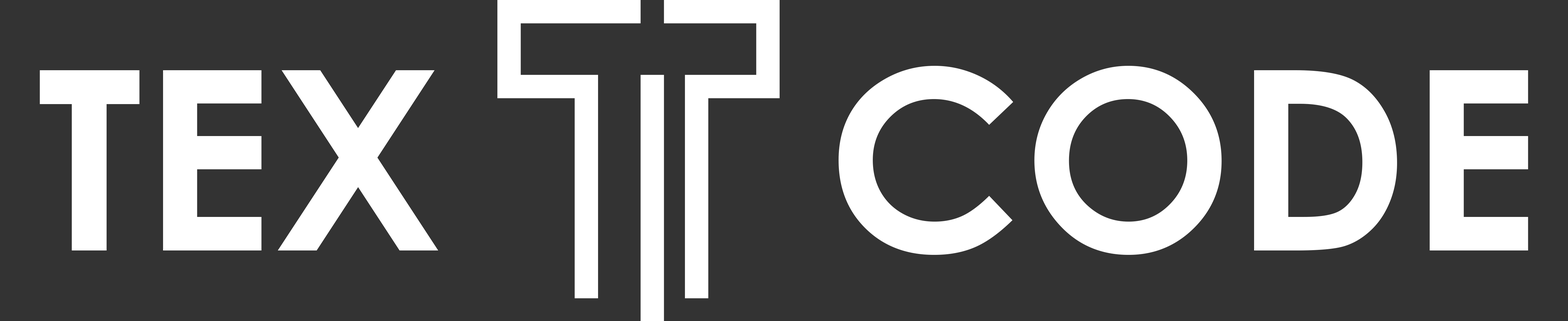
<style>
.page{position:relative;width:1568px;height:321px;background:#333333}
.page>*{position:absolute;margin:0}
.t1{font:250.9px "CenturyGothic-Bold";color:#ffffff}
</style>
<div class="page">
<p class="t1" style="left:839px;top:66px;width:689px;height:189px">CODE</p>
<p class="t1" style="left:40px;top:70px;width:398px;height:181px">TEX</p>
</div>
